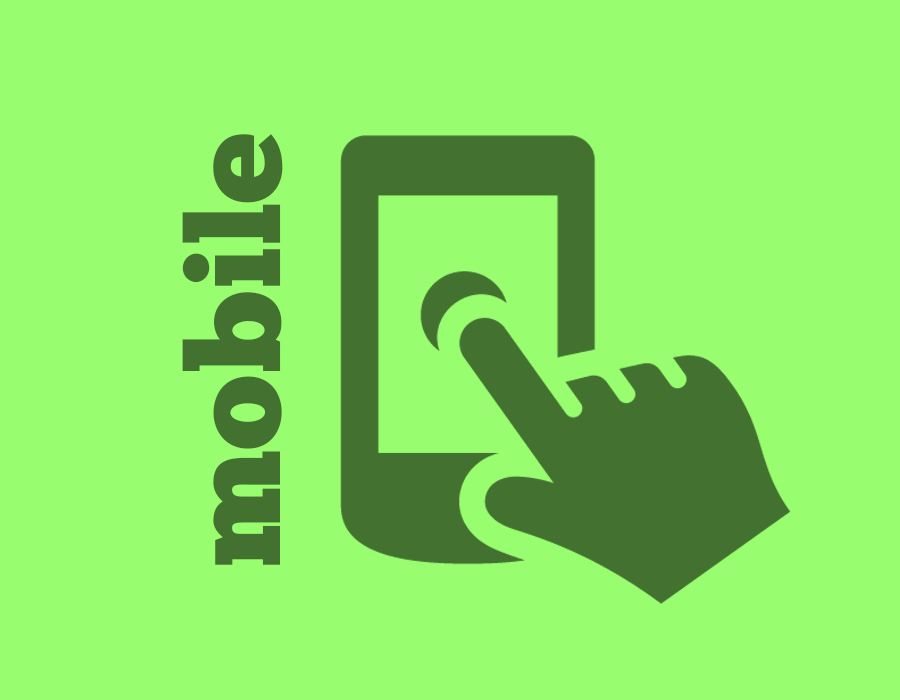
<style>
.page{position:relative;width:900px;height:700px;background:#98fd6f}
.page>*{position:absolute;margin:0}
.t1{font:129.9px "ChunkFive-Roman";color:#437230}
</style>
<div class="page">
<p class="t1" style="left:182px;top:134px;width:101px;height:431px;rotate:-90deg">mobile</p>
</div>
